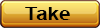
<style>
.page{position:relative;width:100px;height:28px}
.page>*{position:absolute;margin:0}
.t1{font:18px "Arial-BoldMT";color:#000000;scale:1.15 1}
</style>
<div class="page">
<p class="t1" style="left:25px;top:7px;width:45px;height:13px">Take</p>
</div>
